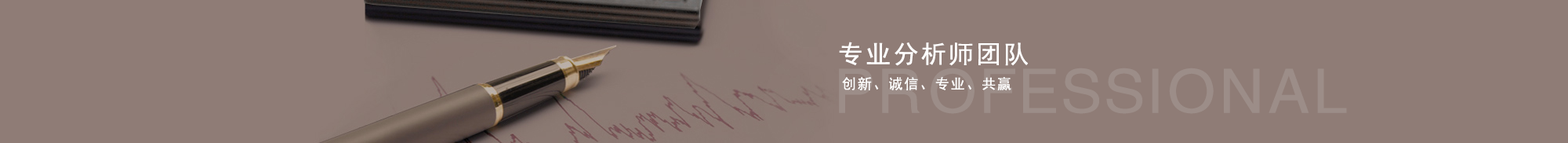
<style>
.page{position:relative;width:1568px;height:143px;background:#8f7c76}
.page>*{position:absolute;margin:0}
.t1{font:25.1px "SimHei";letter-spacing:0.1em;color:#ffffff}
.t2{font:56.4px "FZYDZHJW--GB1-0";letter-spacing:0.1em;color:#9c8d88}
.t3{font:14.1px "SimHei";letter-spacing:0.1em;color:#ffffff}
</style>
<div class="page">
<p class="t1" style="left:839px;top:42px;width:190px;height:24px">专业分析师团队</p>
<p class="t2" style="left:839px;top:67px;width:508px;height:47px">PROFESSIONAL</p>
<p class="t3" style="left:842px;top:77px;width:169px;height:13px">创新、诚信、专业、共赢</p>
</div>
